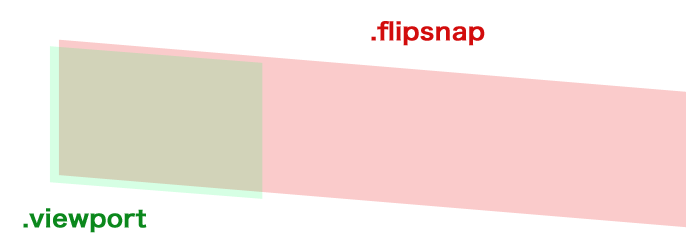
<style>
.page{position:relative;width:700px;height:245px;background:#ffffff}
.page>*{position:absolute;margin:0}
.t1{font:24px "HiraKakuPro-W6";color:#d20c0c;font-weight:bold}
.t2{font:24px "HiraKakuPro-W6";color:#0b881c;font-weight:bold}
</style>
<div class="page">
<p class="t1" style="left:371px;top:21px;width:114px;height:25px">.flipsnap</p>
<p class="t2" style="left:23px;top:208px;width:124px;height:25px">.viewport</p>
</div>
